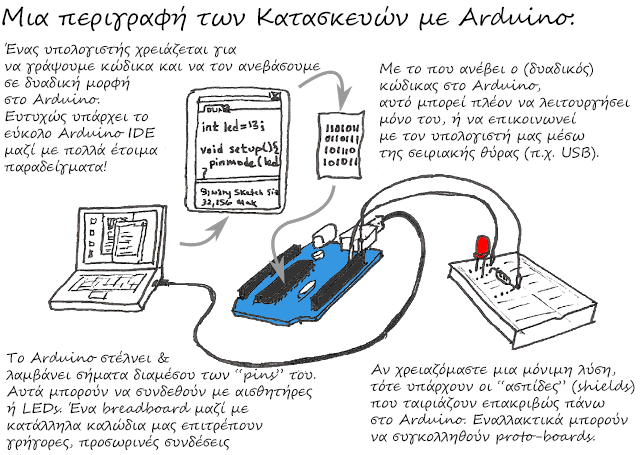
<style>
.page{position:relative;width:640px;height:455px;background:#ffffff}
.page>*{position:absolute;margin:0}
.t1{font:24px "SegoeScript";color:#000000}
.t2{font:14px "SegoeScript";color:#000000}
</style>
<div class="page">
<p class="t1" style="left:2px;top:5px;width:572px;height:26px">Μια περιγραφή των Κατασκευών με Arduino:</p>
<p class="t2" style="left:4px;top:42px;width:317px;height:133px">Ένας υπολογιστής χρειάζεται για <br>να γράψουμε κώδικα και να τον ανεβάσουμε<br>σε δυαδική μορφή<br>στο Arduino.<br>Ευτυχώς υπάρχει το<br>εύκολο Arduino IDE<br>μαζί με πολλά έτοιμα<br>παραδείγματα!</p>
<p class="t2" style="left:379px;top:61px;width:251px;height:100px">Με το που ανέβει ο (δυαδικός)<br>κώδικας στο Arduino,<br>αυτό μπορεί πλέον να λειτουργήσει<br>μόνο του, ή να επικοινωνεί<br>με τον υπολογιστή μας μέσω<br>της σειριακής θύρας (π.χ. USB).</p>
<p class="t2" style="left:6px;top:350px;width:310px;height:101px">Το Arduino στέλνει &amp;<br>λαμβάνει σήματα διαμέσου των “pins” του.<br>Αυτά μπορούν να συνδεθούν με αισθητήρες<br>ή LEDs. Ένα breadboard μαζί με<br>κατάλληλα καλώδια μας επιτρέπουν<br>γρήγορες, προσωρινές συνδέσεις</p>
<p class="t2" style="left:370px;top:362px;width:265px;height:83px">Αν χρειαζόμαστε μια μόνιμη λύση,<br>τότε υπάρχουν οι “ασπίδες” (shields)<br>που ταιριάζουν επακριβώς πάνω<br>στο Arduino. Εναλλακτικά μπορούν<br>να συγκολληθούν proto-boards.</p>
</div>
